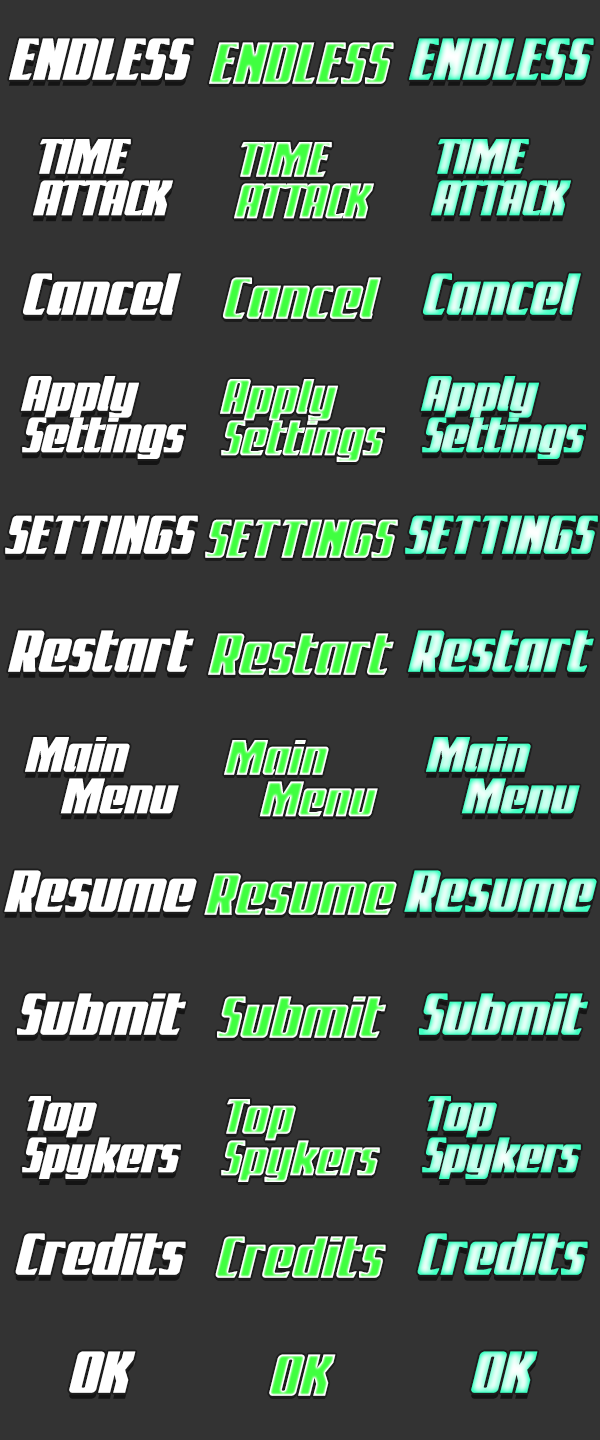
<style>
.page{position:relative;width:600px;height:1440px;background:#333333}
.page>*{position:absolute;margin:0}
.t1{font:54.2px "FlightLegion";color:#ffffff}
.t2{font:54.2px "FlightLegion"}
.t3{font:45.8px/41.7px "FlightLegion";color:#ffffff}
.t4{font:45.8px/41.7px "FlightLegion"}
.t5{font:50px "FlightLegion";color:#ffffff}
.t6{font:50px "FlightLegion"}
</style>
<div class="page">
<p class="t1" style="left:9px;top:38px;width:185px;height:42px">ENDLESS</p>
<p class="t2" style="left:409px;top:38px;width:185px;height:42px">ENDLESS</p>
<p class="t2" style="left:209px;top:42px;width:185px;height:42px">ENDLESS</p>
<p class="t3" style="left:33px;top:139px;width:140px;height:77px">TIME<br>ATTACK</p>
<p class="t4" style="left:234px;top:142px;width:140px;height:77px">TIME<br>ATTACK</p>
<p class="t4" style="left:431px;top:139px;width:140px;height:77px">TIME<br>ATTACK</p>
<p class="t1" style="left:23px;top:273px;width:158px;height:42px">Cancel</p>
<p class="t2" style="left:223px;top:277px;width:158px;height:42px">Cancel</p>
<p class="t2" style="left:423px;top:273px;width:158px;height:42px">Cancel</p>
<p class="t3" style="left:21px;top:376px;width:165px;height:83px">Apply<br>Settings</p>
<p class="t4" style="left:421px;top:376px;width:165px;height:83px">Apply<br>Settings</p>
<p class="t4" style="left:220px;top:379px;width:165px;height:83px">Apply<br>Settings</p>
<p class="t5" style="left:5px;top:515px;width:193px;height:39px">SETTINGS</p>
<p class="t6" style="left:205px;top:519px;width:193px;height:39px">SETTINGS</p>
<p class="t6" style="left:405px;top:515px;width:193px;height:39px">SETTINGS</p>
<p class="t1" style="left:8px;top:630px;width:186px;height:42px">Restart</p>
<p class="t2" style="left:408px;top:630px;width:186px;height:42px">Restart</p>
<p class="t2" style="left:208px;top:633px;width:186px;height:42px">Restart</p>
<p class="t3" style="left:25px;top:737px;width:154px;height:77px">Main<br>   Menu</p>
<p class="t4" style="left:426px;top:737px;width:154px;height:77px">Main<br>   Menu</p>
<p class="t4" style="left:224px;top:740px;width:154px;height:77px">Main<br>   Menu</p>
<p class="t1" style="left:4px;top:870px;width:193px;height:42px">Resume</p>
<p class="t2" style="left:404px;top:870px;width:193px;height:42px">Resume</p>
<p class="t2" style="left:204px;top:873px;width:193px;height:42px">Resume</p>
<p class="t1" style="left:17px;top:993px;width:169px;height:42px">Submit</p>
<p class="t2" style="left:217px;top:996px;width:169px;height:42px">Submit</p>
<p class="t2" style="left:419px;top:993px;width:169px;height:42px">Submit</p>
<p class="t3" style="left:22px;top:1096px;width:159px;height:83px">Top<br>Spykers</p>
<p class="t4" style="left:422px;top:1096px;width:159px;height:83px">Top<br>Spykers</p>
<p class="t4" style="left:221px;top:1099px;width:159px;height:83px">Top<br>Spykers</p>
<p class="t1" style="left:15px;top:1233px;width:171px;height:42px">Credits</p>
<p class="t2" style="left:215px;top:1236px;width:171px;height:42px">Credits</p>
<p class="t2" style="left:417px;top:1233px;width:171px;height:42px">Credits</p>
<p class="t1" style="left:69px;top:1351px;width:67px;height:42px">OK</p>
<p class="t2" style="left:269px;top:1354px;width:67px;height:42px">OK</p>
<p class="t2" style="left:471px;top:1351px;width:67px;height:42px">OK</p>
</div>
